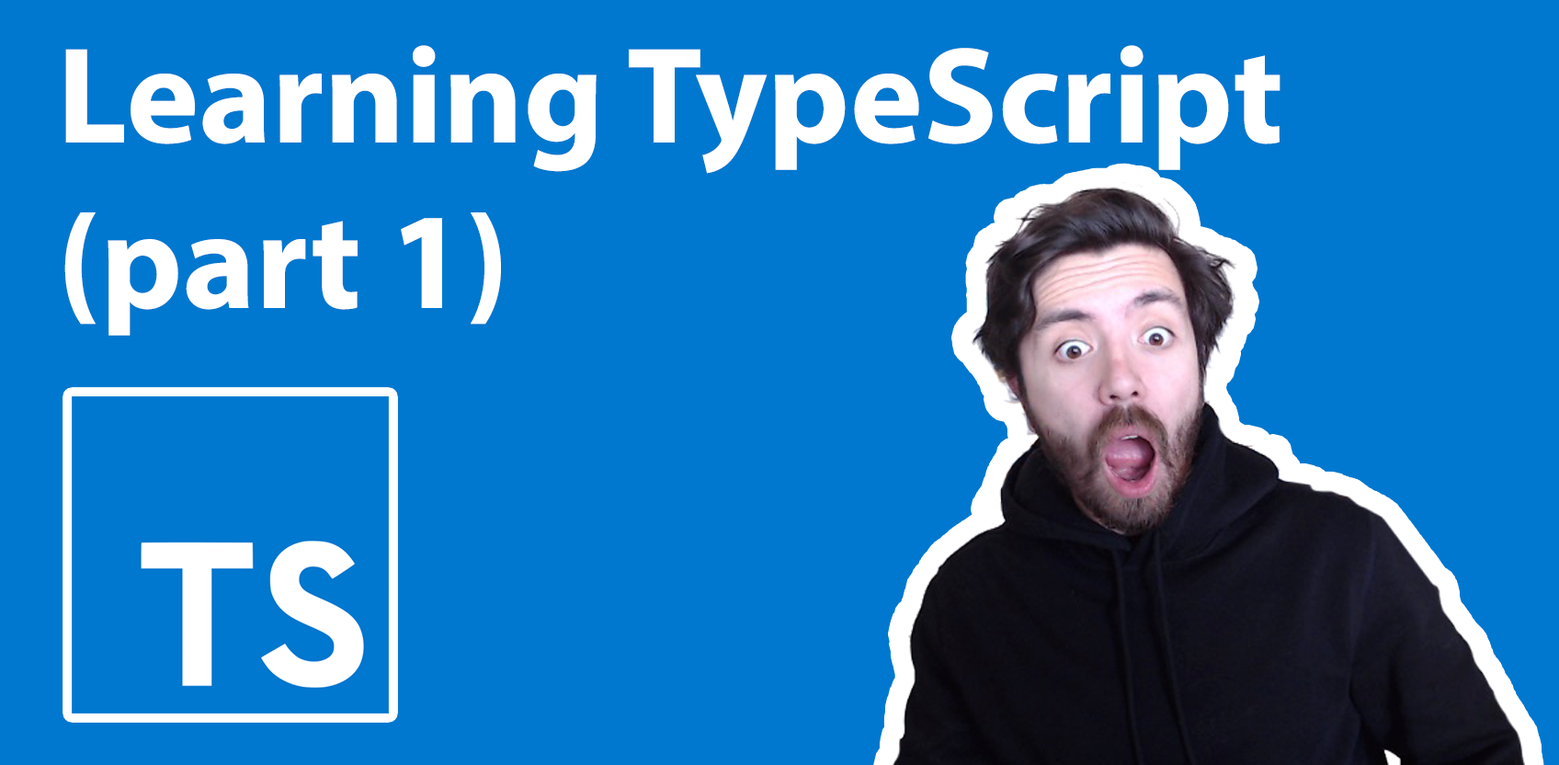
<style>
.page{position:relative;width:1559px;height:765px;background:#0078cf}
.page>*{position:absolute;margin:0}
.t1{font:137.9px "MyriadPro-Bold";color:#ffffff}
</style>
<div class="page">
<p class="t1" style="left:64px;top:45px;width:1217px;height:291px">Learning TypeScript (part 1)</p>
</div>
